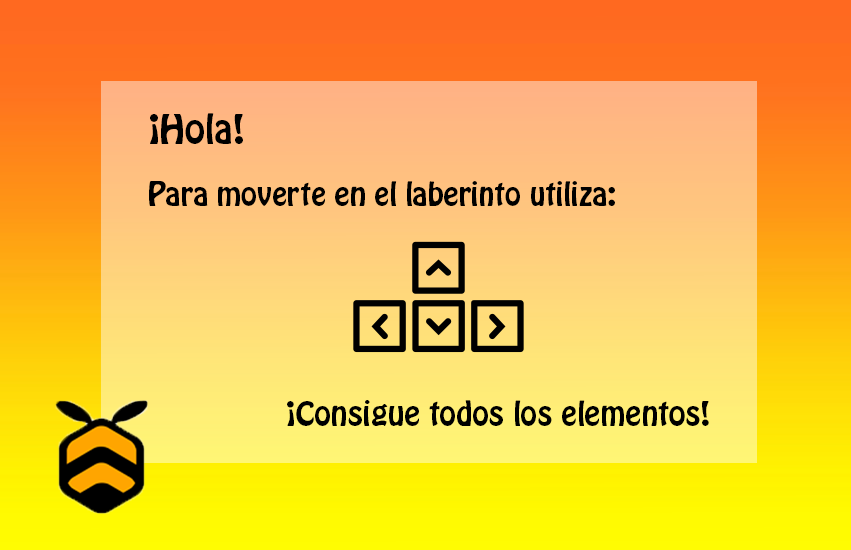
<style>
.page{position:relative;width:851px;height:550px}
.page>*{position:absolute;margin:0}
.t1{font:36px "HoboStd";color:#000000}
.t2{font:29px "HoboStd";color:#000000}
.t3{font:30px "HoboStd";color:#000000}
</style>
<div class="page">
<p class="t1" style="left:150px;top:113px;width:93px;height:31px">¡Hola!</p>
<p class="t2" style="left:149px;top:181px;width:466px;height:25px">Para moverte en el laberinto utiliza:</p>
<p class="t3" style="left:287px;top:400px;width:422px;height:26px">¡Consigue todos los elementos!</p>
</div>
